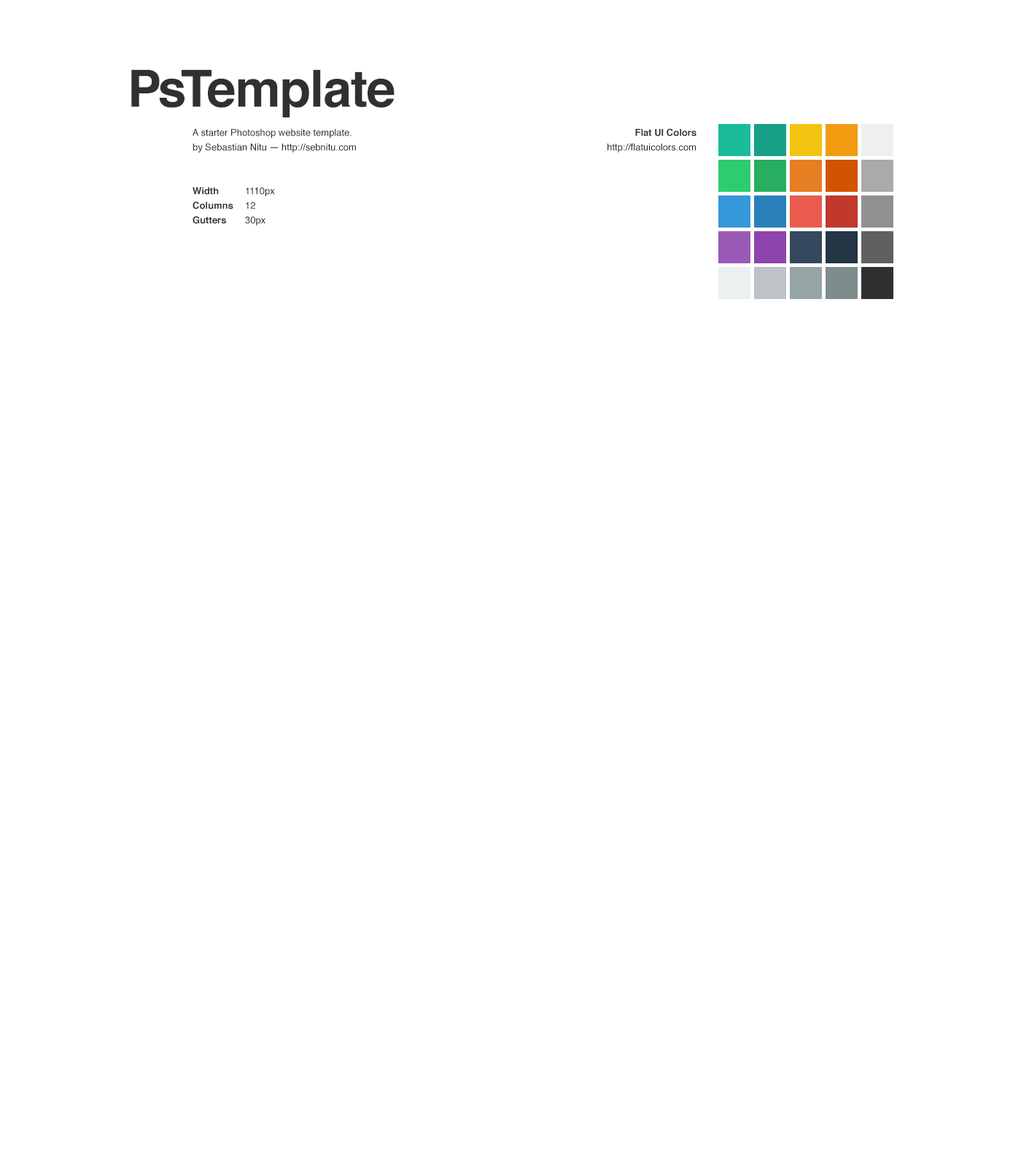
<style>
.page{position:relative;width:1021px;height:1167px;background:#ffffff}
.page>*{position:absolute;margin:0}
.t1{font:51.1px "Helvetica-Bold";color:#303030}
.t2{font:9.5px/14.6px "Helvetica";color:#303030}
.t3{font:9.5px/14.6px "Helvetica-Bold";color:#303030}
</style>
<div class="page">
<p class="t1" style="left:131px;top:69px;width:264px;height:48px">PsTemplate</p>
<p class="t2" style="left:193px;top:128px;width:163px;height:97px">A starter Photoshop website template.<br>by Sebastian Nitu — http://sebnitu.com<br><span class="t3">Width</span>  1110px<br><span class="t3">Columns</span>  12<br><span class="t3">Gutters</span>  30px</p>
<p class="t2" style="left:608px;top:128px;width:89px;height:24px;text-align:right"><span class="t3">Flat UI Colors<br></span>http://flatuicolors.com</p>
</div>
